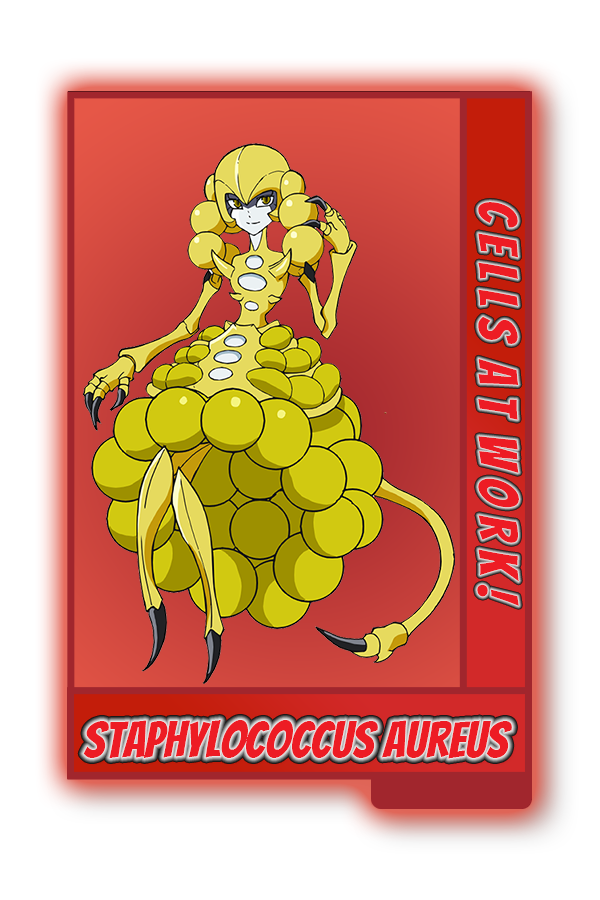
<style>
.page{position:relative;width:600px;height:900px;background:#ffffff}
.page>*{position:absolute;margin:0}
.t1{font:54px "Bangers-Regular";color:#ed1c24}
.t2{font:50px "Bangers-Regular";color:#ed1c24}
</style>
<div class="page">
<p class="t1" style="left:477px;top:202px;width:42px;height:404px;rotate:90deg">C e l l S  A t  W o r k !</p>
<p class="t2" style="left:83px;top:720px;width:429px;height:39px">Staphylococcus aureus</p>
</div>
